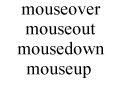
<style>
.page{position:relative;width:120px;height:100px;background:#ffffff}
.page>*{position:absolute;margin:0}
.t1{font:18px "TimesNewRomanPSMT";color:#000000}
</style>
<div class="page">
<p class="t1" style="left:21px;top:6px;width:80px;height:9px">mouseover</p>
<p class="t1" style="left:25px;top:23px;width:71px;height:12px">mouseout</p>
<p class="t1" style="left:17px;top:41px;width:88px;height:14px">mousedown</p>
<p class="t1" style="left:26px;top:66px;width:65px;height:12px">mouseup</p>
</div>
